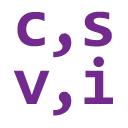
<style>
.page{position:relative;width:128px;height:128px;background:#ffffff}
.page>*{position:absolute;margin:0}
.t1{font:66.7px/58.3px "Consolas-Bold";letter-spacing:-0.05em;color:#732a8e}
</style>
<div class="page">
<p class="t1" style="left:13px;top:11px;width:100px;height:105px">c,s<br>v,i</p>
</div>
